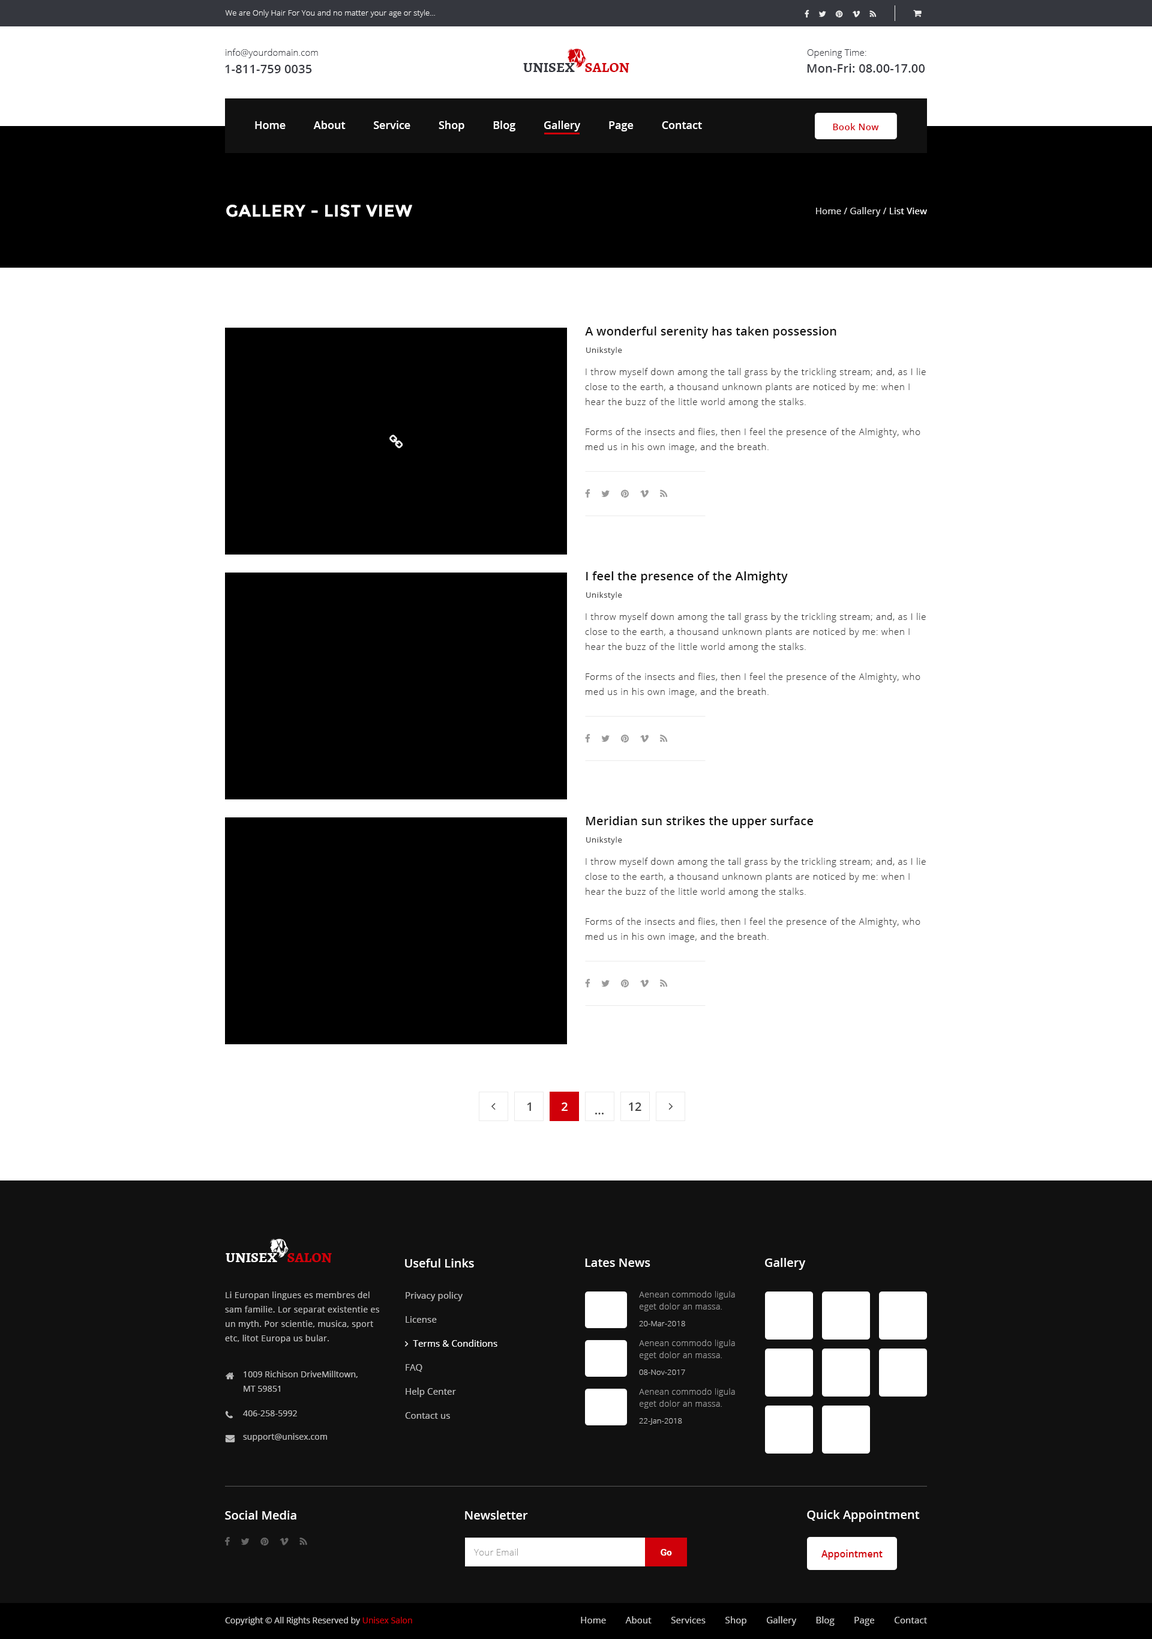
<style>
.page{position:relative;width:1152px;height:1639px;background:#ffffff}
.page>*{position:absolute;margin:0}
.t1{font:7.8px "OpenSans-Light";letter-spacing:0.01em;color:#efefef}
.t2{font:9px "OpenSans-Light";letter-spacing:0.01em;color:#35373e}
.t3{font:12px "OpenSans-Semibold";letter-spacing:0.01em;color:#35373e}
.t4{font:14.4px "Alegreya-Bold";color:#35373e;text-transform:uppercase}
.t5{font:14.4px "Alegreya-Bold";color:#d00009;text-transform:uppercase}
.t6{font:10.8px "OpenSans-Semibold";color:#ffffff}
.t7{font:9px "OpenSans-Semibold";letter-spacing:0.03em;color:#d00009}
.t8{font:16.8px "Montserrat-Bold";letter-spacing:0.02em;color:#ffffff;text-transform:uppercase}
.t9{font:9px "OpenSans";letter-spacing:0.02em;color:#dddddd}
.t10{font:9px "OpenSans";letter-spacing:0.02em;color:#ffffff}
.t11{font:12px "OpenSans-Semibold";letter-spacing:0.01em;color:#111111}
.t12{font:7.8px "OpenSans";letter-spacing:0.05em;color:#444444}
.t13{font:9px/15px "OpenSans-Light";letter-spacing:0.05em;color:#333333}
.t14{font:12px "OpenSans-Semibold";color:#444444}
.t15{font:12px "OpenSans-Semibold";color:#ffffff}
.t16{font:14.4px "Alegreya-Bold";color:#ffffff;text-transform:uppercase}
.t17{font:8.4px/14.4px "OpenSans";letter-spacing:0.03em;color:#bbbbbb}
.t18{font:8.4px/12px "OpenSans-Light";letter-spacing:0.03em;color:#999999}
.t19{font:7.8px "OpenSans-Light";letter-spacing:0.01em;color:#bbbbbb}
.t20{font:8.4px/14.4px "OpenSans";letter-spacing:0.01em;color:#bbbbbb}
.t21{font:8.4px "OpenSans";letter-spacing:0.01em;color:#bbbbbb}
.t22{font:9px "OpenSans-Light";letter-spacing:0.02em;color:#999999}
.t23{font:9px "RobotoSlab-Bold";letter-spacing:0.02em;color:#ffffff}
.t24{font:9.6px "OpenSans-Semibold";color:#d00009}
.t25{font:8.4px "OpenSans";color:#cccccc}
.t26{font:8.4px "OpenSans";color:#d00009}
.t27{font:9px "OpenSans";letter-spacing:0.01em;color:#cccccc}
</style>
<div class="page">
<p class="t1" style="left:225px;top:10px;width:210px;height:7px">We are Only Hair For You and no matter your age or style...</p>
<p class="t2" style="left:226px;top:49px;width:92px;height:9px">info@yourdomain.com</p>
<p class="t2" style="left:807px;top:49px;width:59px;height:9px">Opening Time:</p>
<p class="t3" style="left:225px;top:65px;width:87px;height:8px">1-811-759 0035</p>
<p class="t4" style="left:523px;top:62px;width:106px;height:11px">Unisex    <span class="t5">Salon</span></p>
<p class="t3" style="left:807px;top:64px;width:118px;height:9px">Mon-Fri: 08.00-17.00</p>
<p class="t6" style="left:255px;top:121px;width:447px;height:10px">Home          About          Service          Shop          Blog          Gallery          Page          Contact</p>
<p class="t7" style="left:833px;top:123px;width:46px;height:7px">Book Now</p>
<p class="t8" style="left:226px;top:205px;width:186px;height:12px">Gallery - list view</p>
<p class="t9" style="left:816px;top:207px;width:111px;height:10px">Home / Gallery / <span class="t10">List View</span></p>
<p class="t11" style="left:585px;top:326px;width:251px;height:12px">A wonderful serenity has taken possession</p>
<p class="t12" style="left:586px;top:347px;width:36px;height:8px">Unikstyle</p>
<p class="t13" style="left:585px;top:368px;width:341px;height:84px">I throw myself down among the tall grass by the trickling stream; and, as I lie close to the earth, a thousand unknown plants are noticed by me: when I hear the buzz of the little world among the stalks.<br><br>Forms of the insects and flies, then I feel the presence of the Almighty, who med us in his own image, and the breath.</p>
<p class="t11" style="left:586px;top:571px;width:202px;height:12px">I feel the presence of the Almighty</p>
<p class="t12" style="left:586px;top:592px;width:36px;height:7px">Unikstyle</p>
<p class="t13" style="left:585px;top:613px;width:341px;height:84px">I throw myself down among the tall grass by the trickling stream; and, as I lie close to the earth, a thousand unknown plants are noticed by me: when I hear the buzz of the little world among the stalks.<br><br>Forms of the insects and flies, then I feel the presence of the Almighty, who med us in his own image, and the breath.</p>
<p class="t11" style="left:586px;top:816px;width:227px;height:12px">Meridian sun strikes the upper surface</p>
<p class="t12" style="left:586px;top:836px;width:36px;height:8px">Unikstyle</p>
<p class="t13" style="left:585px;top:857px;width:341px;height:85px">I throw myself down among the tall grass by the trickling stream; and, as I lie close to the earth, a thousand unknown plants are noticed by me: when I hear the buzz of the little world among the stalks.<br><br>Forms of the insects and flies, then I feel the presence of the Almighty, who med us in his own image, and the breath.</p>
<p class="t14" style="left:527px;top:1102px;width:4px;height:9px">1</p>
<p class="t15" style="left:562px;top:1102px;width:6px;height:9px">2</p>
<p class="t14" style="left:629px;top:1102px;width:12px;height:9px">12</p>
<p class="t14" style="left:595px;top:1112px;width:9px;height:2px">...</p>
<p class="t16" style="left:226px;top:1252px;width:106px;height:10px">Unisex    <span class="t5">Salon</span></p>
<p class="t15" style="left:405px;top:1258px;width:69px;height:9px">Useful Links</p>
<p class="t15" style="left:585px;top:1258px;width:65px;height:9px">Lates News</p>
<p class="t15" style="left:765px;top:1258px;width:41px;height:12px">Gallery</p>
<p class="t17" style="left:225px;top:1291px;width:154px;height:52px">Li Europan lingues es membres del sam familie. Lor separat existentie es un myth. Por scientie, musica, sport etc, litot Europa us bular.</p>
<p class="t18" style="left:639px;top:1291px;width:96px;height:20px">Aenean commodo ligula eget dolor an massa.</p>
<p class="t19" style="left:639px;top:1321px;width:46px;height:5px">20-Mar-2018</p>
<p class="t18" style="left:639px;top:1339px;width:96px;height:21px">Aenean commodo ligula eget dolor an massa.</p>
<p class="t20" style="left:244px;top:1370px;width:114px;height:21px">1009 Richison DriveMilltown, <br>MT 59851</p>
<p class="t19" style="left:639px;top:1369px;width:46px;height:6px">08-Nov-2017</p>
<p class="t18" style="left:639px;top:1388px;width:96px;height:20px">Aenean commodo ligula eget dolor an massa.</p>
<p class="t21" style="left:243px;top:1410px;width:54px;height:6px">406-258-5992</p>
<p class="t19" style="left:639px;top:1418px;width:43px;height:6px">22-Jan-2018</p>
<p class="t21" style="left:243px;top:1433px;width:84px;height:8px">support@unisex.com</p>
<p class="t15" style="left:225px;top:1510px;width:71px;height:9px">Social Media</p>
<p class="t15" style="left:465px;top:1510px;width:63px;height:9px">Newsletter</p>
<p class="t15" style="left:807px;top:1510px;width:113px;height:12px">Quick Appointment</p>
<p class="t22" style="left:474px;top:1548px;width:44px;height:7px">Your Email</p>
<p class="t23" style="left:661px;top:1549px;width:11px;height:6px">Go</p>
<p class="t24" style="left:821px;top:1549px;width:62px;height:10px">Appointment</p>
<p class="t25" style="left:225px;top:1616px;width:187px;height:9px">Copyright © All Rights Reserved by <span class="t26">Unisex Salon</span></p>
<p class="t27" style="left:581px;top:1616px;width:346px;height:9px">Home        About        Services        Shop        Gallery        Blog        Page        Contact</p>
</div>
